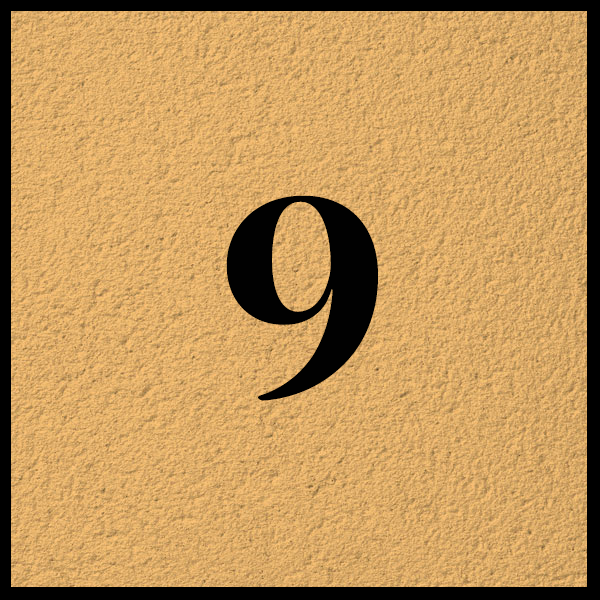
<style>
.page{position:relative;width:600px;height:600px}
.page>*{position:absolute;margin:0}
.t1{font:333.3px "NuevaStd-Bold";color:#010101}
</style>
<div class="page">
<p class="t1" style="left:226px;top:195px;width:152px;height:206px">9</p>
</div>
